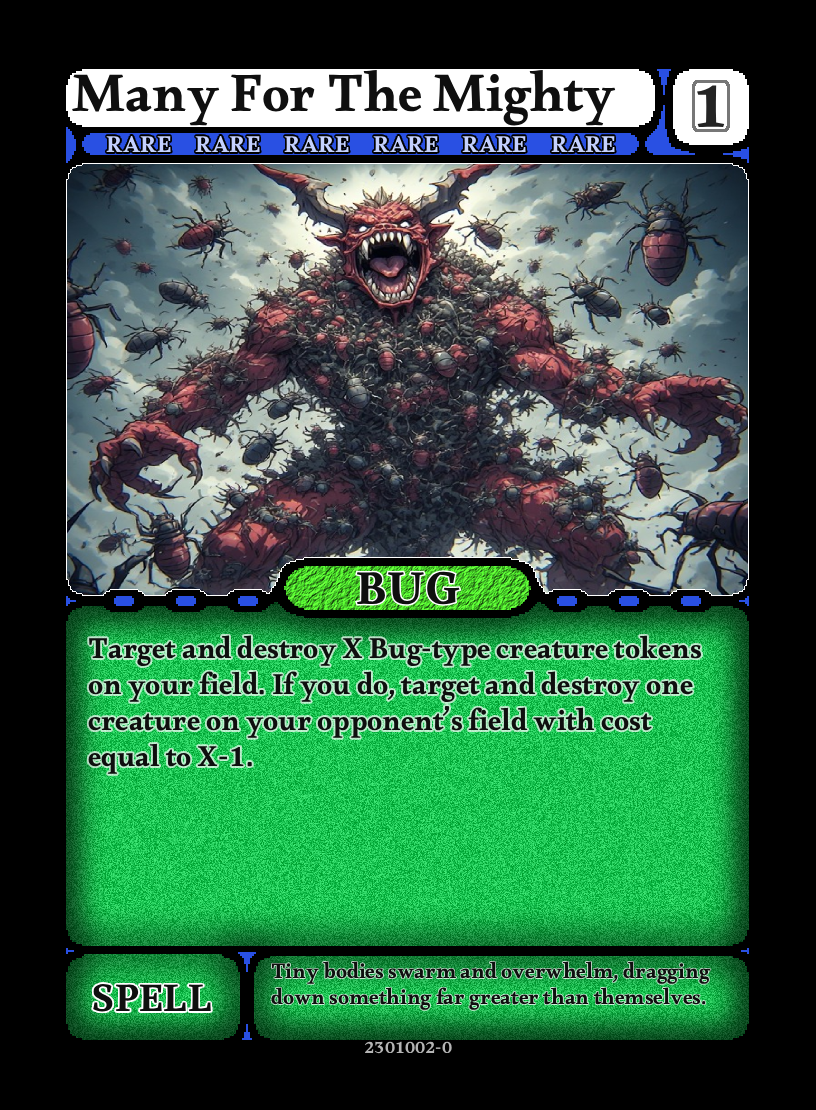
<style>
.page{position:relative;width:816px;height:1110px;background:#000000}
.page>*{position:absolute;margin:0}
.t1{font:55px "Alkalami-Regular";color:#0f0f0f}
.t2{font:30px "Alkalami-Regular";color:#0f0f0f}
.t3{font:22px "Alkalami-Regular";color:#0f0f0f}
.t4{font:40px "Alkalami-Regular";color:#0f0f0f}
.t5{font:18px "Alkalami-Regular";color:#b5b5b5}
</style>
<div class="page">
<p class="t1" style="left:72px;top:70px;width:544px;height:56px">Many For The Mighty</p>
<p class="t2" style="left:88px;top:635px;width:614px;height:139px">Target and destroy X Bug-type creature tokens <br>on your field. If you do, target and destroy one <br>creature on your opponent’s field with cost <br>equal to X-1.</p>
<p class="t3" style="left:271px;top:961px;width:440px;height:49px">Tiny bodies swarm and overwhelm, dragging <br>down something far greater than themselves.</p>
<p class="t4" style="left:93px;top:984px;width:118px;height:28px">SPELL</p>
<p class="t5" style="left:364px;top:1041px;width:88px;height:13px">2301002-0</p>
</div>
